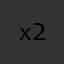
<style>
.page{position:relative;width:64px;height:64px;background:#333333}
.page>*{position:absolute;margin:0}
.t1{font:25px "Candara";color:#000000}
.t2{font:33.3px "Candara";color:#000000}
</style>
<div class="page">
<p class="t1" style="left:19px;top:23px;width:27px;height:17px">x<span class="t2">2</span></p>
</div>
